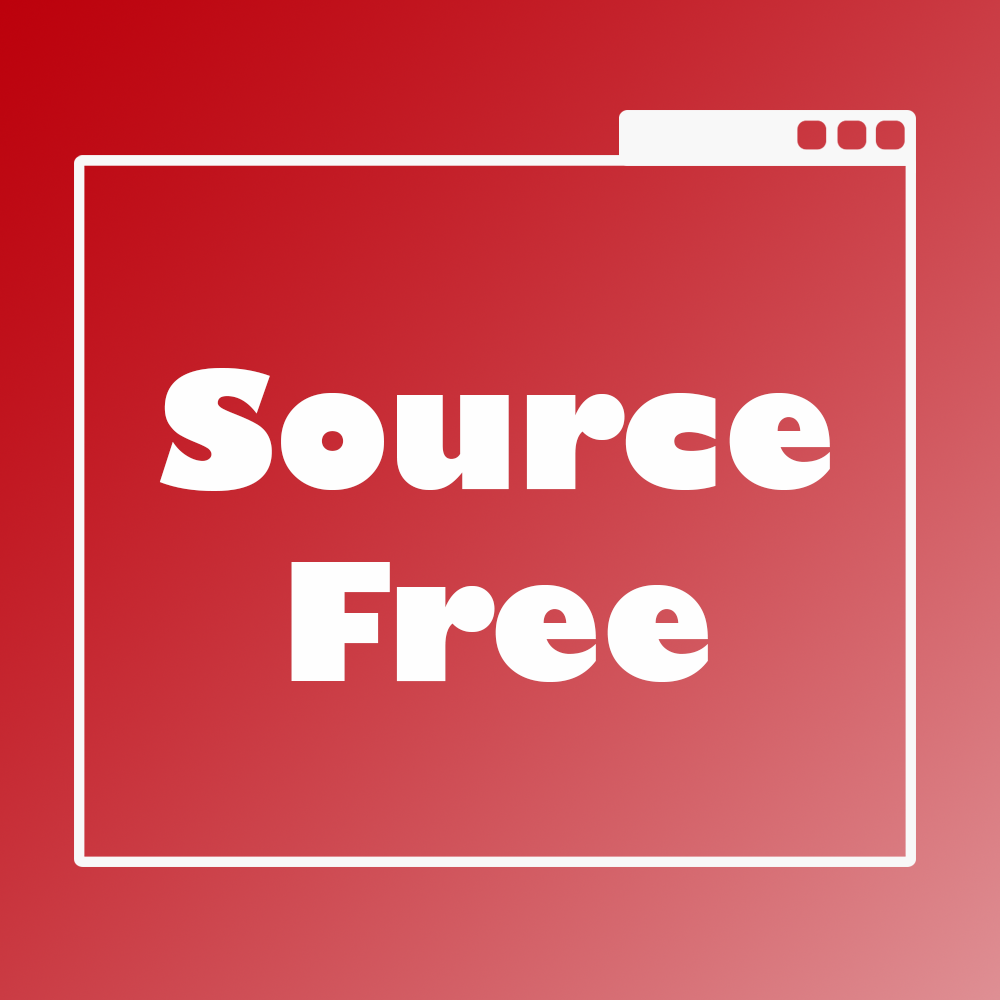
<style>
.page{position:relative;width:1000px;height:1000px}
.page>*{position:absolute;margin:0}
.t1{font:160px "GillSans-UltraBold";color:#fefefe}
</style>
<div class="page">
<p class="t1" style="left:159px;top:368px;width:671px;height:314px;text-align:center">Source<br>Free</p>
</div>
